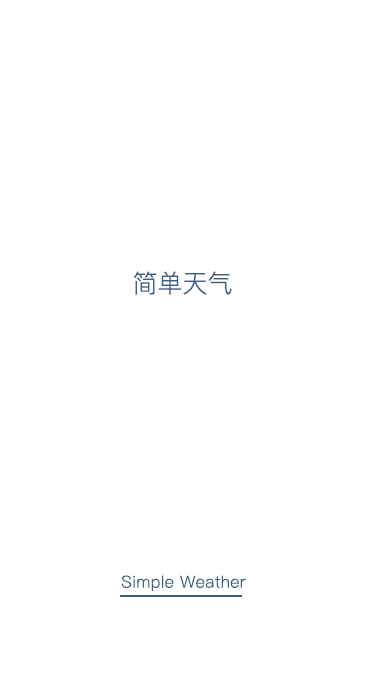
<style>
.page{position:relative;width:375px;height:675px;background:#ffffff}
.page>*{position:absolute;margin:0}
.t1{font:25px "PingFang-SC-Regular";color:#3c5f81}
.t2{font:16.7px "PingFang-SC-Regular";letter-spacing:0.02em;color:#3c5f81}
</style>
<div class="page">
<p class="t1" style="left:133px;top:271px;width:99px;height:24px">简单天气</p>
<p class="t2" style="left:121px;top:575px;width:125px;height:16px">Simple Weather</p>
</div>
